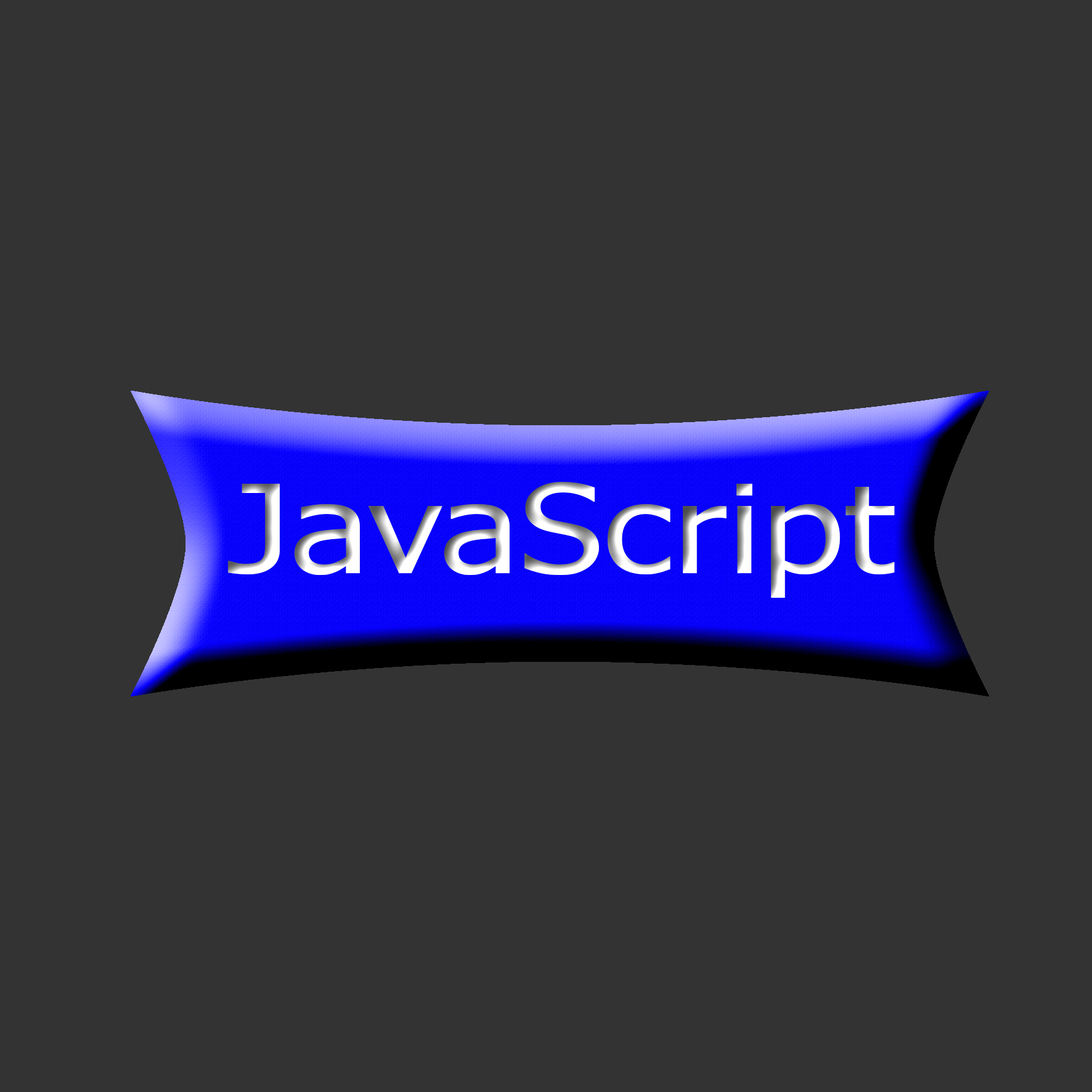
<style>
.page{position:relative;width:1092px;height:1092px;background:#333333}
.page>*{position:absolute;margin:0}
.t1{font:122.5px "Tahoma";scale:1.23 1}
</style>
<div class="page">
<p class="t1" style="left:228px;top:481px;width:667px;height:117px">JavaScript</p>
</div>
